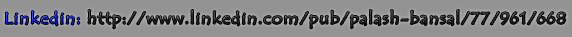
<style>
.page{position:relative;width:572px;height:37px;background:#939393}
.page>*{position:absolute;margin:0}
.t1{font:27.6px "TempusSansITC";letter-spacing:0.05em;color:#282828;scale:1.12 1}
.t2{font:27.6px "TempusSansITC";letter-spacing:0.05em;color:#0f1ff3;scale:1.12 1}
</style>
<div class="page">
<p class="t1" style="left:5px;top:10px;width:561px;height:19px"><span class="t2">Linkedin:</span> http://www.linkedin.com/pub/palash-bansal/77/961/668</p>
</div>
